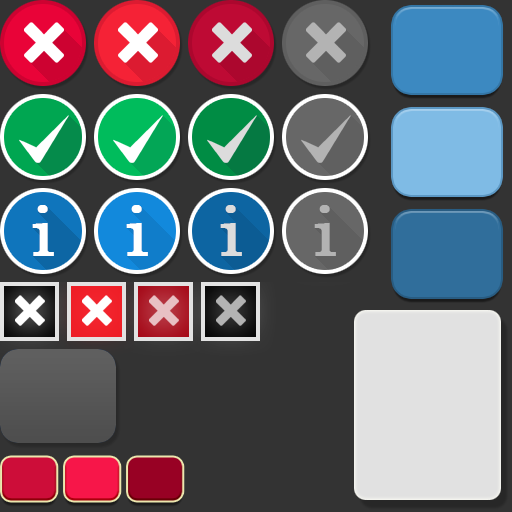
<style>
.page{position:relative;width:512px;height:512px;background:#333333}
.page>*{position:absolute;margin:0}
.t1{font:70.9px "Century";color:#ffffff;font-weight:bold}
.t2{font:70.9px "Century";color:#dcdcdc;font-weight:bold}
</style>
<div class="page">
<p class="t1" style="left:32px;top:205px;width:22px;height:51px">i</p>
<p class="t1" style="left:126px;top:205px;width:22px;height:51px">i</p>
<p class="t2" style="left:220px;top:205px;width:22px;height:51px">i</p>
</div>
